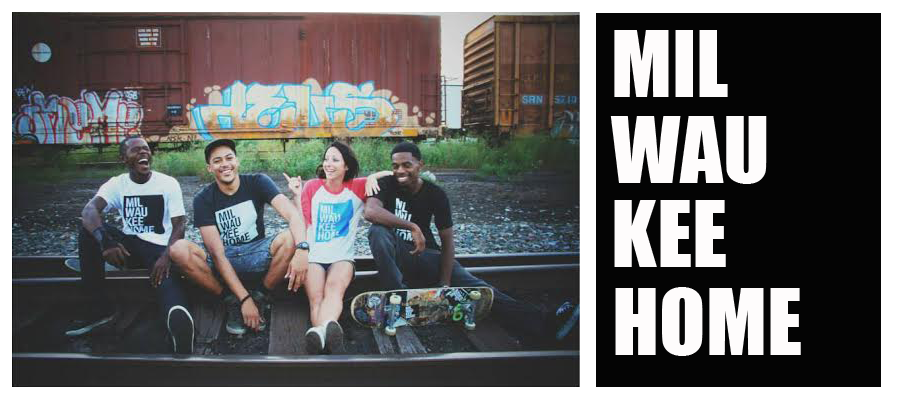
<style>
.page{position:relative;width:900px;height:400px;background:#040404}
.page>*{position:absolute;margin:0}
.t1{font:85px "Impact";color:#fefcfc}
</style>
<div class="page">
<p class="t1" style="left:614px;top:30px;width:114px;height:67px">MIL</p>
<p class="t1" style="left:610px;top:116px;width:157px;height:68px">WAU</p>
<p class="t1" style="left:614px;top:200px;width:112px;height:67px">KEE</p>
<p class="t1" style="left:615px;top:287px;width:186px;height:69px">HOME</p>
</div>
